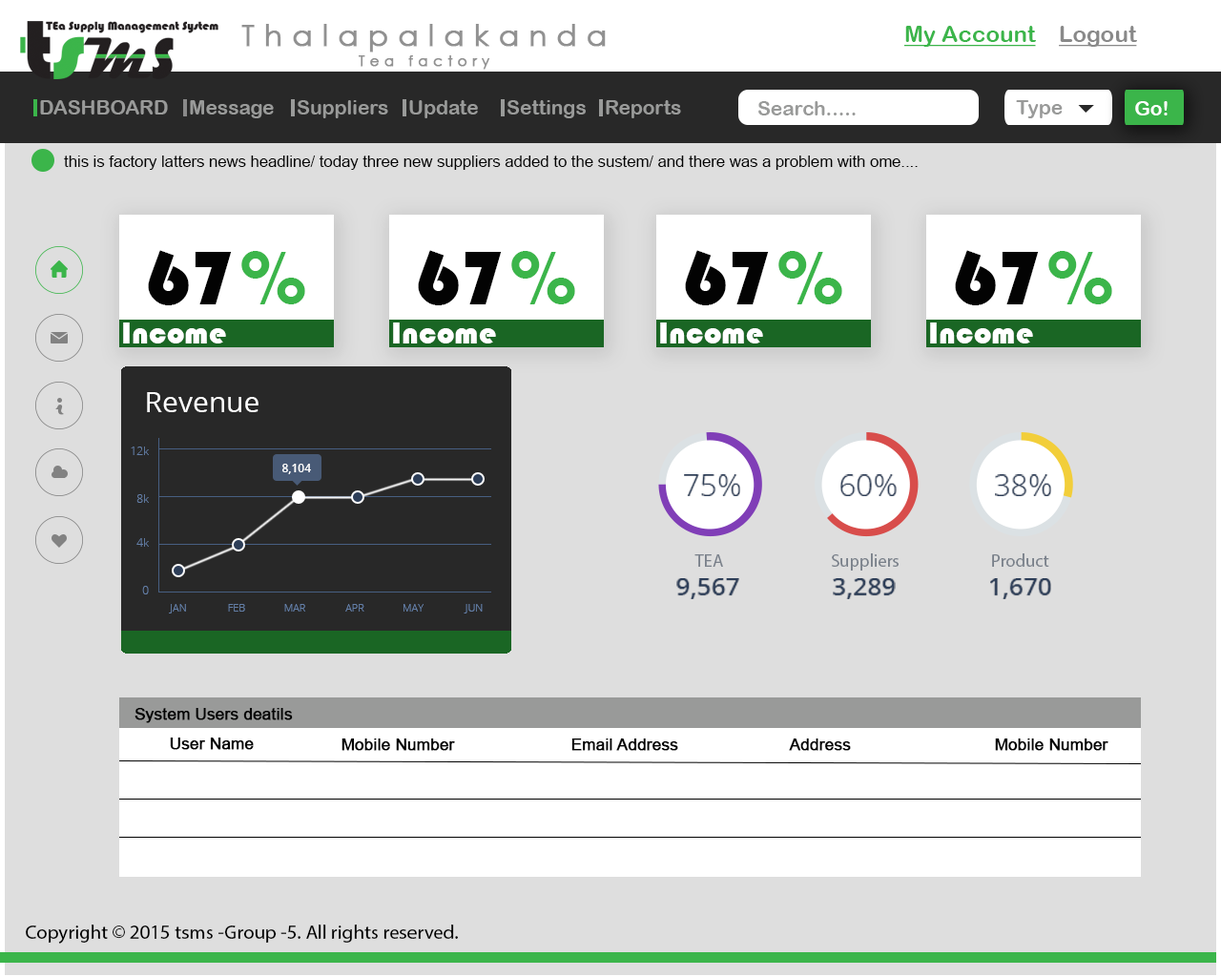
<style>
.page{position:relative;width:1221px;height:977px;background:#dedede}
.page>*{position:absolute;margin:0}
.t1{font:29.2px "CenturyGothic";letter-spacing:0.32em;color:#919191;font-weight:bold}
.t2{font:14.6px "CenturyGothic";letter-spacing:0.32em;color:#919191;font-weight:bold}
.t3{font:23.1px "ArialRoundedMTBold";color:#3bb54a;text-decoration:underline}
.t4{font:23.1px "ArialRoundedMTBold";color:#898989;text-decoration:underline}
.t5{font:19.9px "ArialRoundedMTBold";color:#999a99}
.t6{font:19.9px "ArialRoundedMTBold";color:#ffffff}
.t7{font:15.9px "ArialMT";color:#030303}
.t8{font:79.5px "Bauhaus93";color:#030303}
.t9{font:79.5px "Bauhaus93";color:#3bb54a}
.t10{font:31.8px "Bauhaus93";color:#ffffff}
.t11{font:28.6px "OpenSans";color:#ffffff}
.t12{font:11.4px "OpenSans-Light";color:#647fa7}
.t13{font:11.4px "OpenSans-Semibold";color:#ffffff}
.t14{font:30.2px "OpenSans-Light";color:#2d3e58}
.t15{font:17.6px "MyriadPro-Regular";color:#79808a}
.t16{font:25.2px "OpenSans-Semibold";color:#2d3e58}
.t17{font:10.5px "OpenSans-Light";color:#647fa7;text-transform:uppercase}
.t18{font:15.9px "ArialMT";color:#030303;font-weight:bold}
.t19{font:19.9px "MyriadPro-Regular";color:#000000}
</style>
<div class="page">
<p class="t1" style="left:241px;top:24px;width:365px;height:46px;text-align:center">Thalapalakanda<br><span class="t2">Tea factory</span></p>
<p class="t3" style="left:903px;top:26px;width:133px;height:21px">My Account</p>
<p class="t4" style="left:1059px;top:26px;width:78px;height:21px">Logout</p>
<p class="t5" style="left:40px;top:100px;width:128px;height:14px">DASHBOARD</p>
<p class="t5" style="left:190px;top:100px;width:84px;height:18px">Message</p>
<p class="t5" style="left:298px;top:100px;width:90px;height:18px">Suppliers</p>
<p class="t5" style="left:409px;top:100px;width:69px;height:18px">Update</p>
<p class="t5" style="left:507px;top:100px;width:79px;height:18px">Settings</p>
<p class="t5" style="left:606px;top:100px;width:75px;height:18px">Reports</p>
<p class="t5" style="left:758px;top:101px;width:98px;height:14px">Search.....</p>
<p class="t5" style="left:1016px;top:100px;width:47px;height:18px">Type</p>
<p class="t6" style="left:1135px;top:101px;width:32px;height:14px">Go!</p>
<p class="t7" style="left:64px;top:155px;width:854px;height:15px">this is factory latters news headline/ today three new suppliers added to the sustem/ and there was a problem with ome....</p>
<p class="t8" style="left:148px;top:250px;width:157px;height:55px">67<span class="t9">%</span></p>
<p class="t8" style="left:418px;top:250px;width:157px;height:55px">67<span class="t9">%</span></p>
<p class="t8" style="left:685px;top:250px;width:157px;height:55px">67<span class="t9">%</span></p>
<p class="t8" style="left:955px;top:250px;width:157px;height:55px">67<span class="t9">%</span></p>
<p class="t10" style="left:123px;top:322px;width:103px;height:21px">Income</p>
<p class="t10" style="left:393px;top:322px;width:103px;height:21px">Income</p>
<p class="t10" style="left:660px;top:322px;width:103px;height:21px">Income</p>
<p class="t10" style="left:930px;top:322px;width:103px;height:21px">Income</p>
<p class="t11" style="left:147px;top:392px;width:111px;height:20px">Revenue</p>
<p class="t12" style="left:131px;top:446px;width:18px;height:9px">12k</p>
<p class="t13" style="left:282px;top:464px;width:29px;height:10px">8,104</p>
<p class="t14" style="left:684px;top:474px;width:56px;height:22px">75%</p>
<p class="t14" style="left:840px;top:474px;width:57px;height:22px">60%</p>
<p class="t14" style="left:995px;top:474px;width:56px;height:22px">38%</p>
<p class="t12" style="left:136px;top:494px;width:13px;height:9px">8k</p>
<p class="t12" style="left:136px;top:538px;width:13px;height:9px">4k</p>
<p class="t15" style="left:694px;top:554px;width:29px;height:13px">TEA</p>
<p class="t15" style="left:832px;top:553px;width:66px;height:17px">Suppliers</p>
<p class="t15" style="left:992px;top:553px;width:57px;height:14px">Product</p>
<p class="t16" style="left:676px;top:578px;width:63px;height:21px">9,567</p>
<p class="t16" style="left:833px;top:578px;width:63px;height:21px">3,289</p>
<p class="t16" style="left:990px;top:578px;width:61px;height:21px">1,670</p>
<p class="t12" style="left:142px;top:586px;width:7px;height:8px">0</p>
<p class="t17" style="left:169px;top:604px;width:17px;height:9px">Jan</p>
<p class="t17" style="left:228px;top:604px;width:17px;height:7px">Feb</p>
<p class="t17" style="left:284px;top:604px;width:21px;height:7px">Mar</p>
<p class="t17" style="left:345px;top:604px;width:19px;height:7px">Apr</p>
<p class="t17" style="left:403px;top:604px;width:20px;height:7px">May</p>
<p class="t17" style="left:464px;top:604px;width:19px;height:9px">Jun</p>
<p class="t18" style="left:134px;top:708px;width:159px;height:15px">System Users deatils</p>
<p class="t18" style="left:170px;top:737px;width:84px;height:13px">User Name</p>
<p class="t18" style="left:341px;top:738px;width:114px;height:13px">Mobile Number</p>
<p class="t18" style="left:571px;top:738px;width:107px;height:13px">Email Address</p>
<p class="t18" style="left:789px;top:738px;width:62px;height:13px">Address</p>
<p class="t18" style="left:995px;top:738px;width:113px;height:13px">Mobile Number</p>
<p class="t19" style="left:26px;top:924px;width:432px;height:19px">Copyright © 2015 tsms -Group -5. All rights reserved.</p>
</div>
